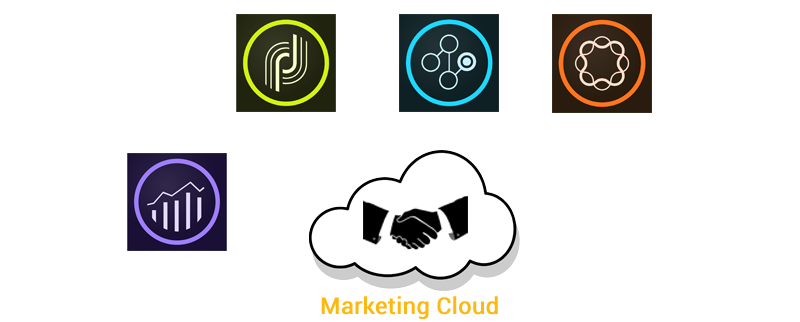
<style>
.page{position:relative;width:800px;height:322px;background:#ffffff}
.page>*{position:absolute;margin:0}
.t1{font:23px "Roboto-Regular";color:#fdb913;font-weight:bold}
</style>
<div class="page">
<p class="t1" style="left:321px;top:296px;width:177px;height:23px">Marketing Cloud</p>
</div>
